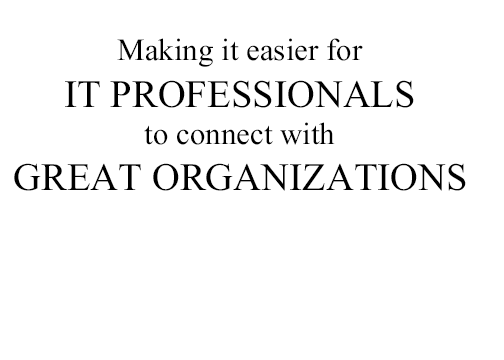
<style>
.page{position:relative;width:504px;height:360px;background:#ffffff}
.page>*{position:absolute;margin:0}
.t1{font:40px "Kokila";color:#000000}
.t2{font:50px "Kokila";color:#000000}
</style>
<div class="page">
<p class="t1" style="left:117px;top:38px;width:246px;height:29px">Making it easier for</p>
<p class="t2" style="left:65px;top:80px;width:349px;height:28px">IT PROFESSIONALS</p>
<p class="t1" style="left:144px;top:122px;width:191px;height:23px">to connect with</p>
<p class="t2" style="left:14px;top:163px;width:452px;height:28px">GREAT ORGANIZATIONS</p>
</div>
